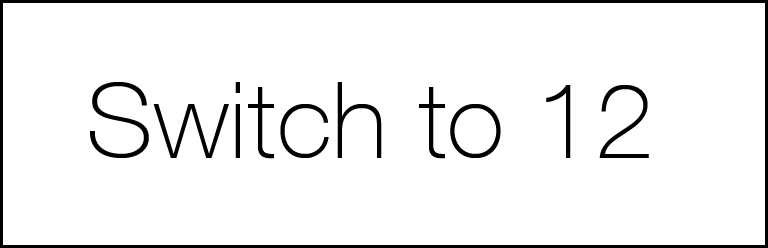
<style>
.page{position:relative;width:768px;height:248px;background:#ffffff}
.page>*{position:absolute;margin:0}
.t1{font:105.6px "HelveticaNeueCE-Thin";letter-spacing:0.01em;color:#000000}
</style>
<div class="page">
<p class="t1" style="left:90px;top:82px;width:559px;height:77px">Switch to 12</p>
</div>
